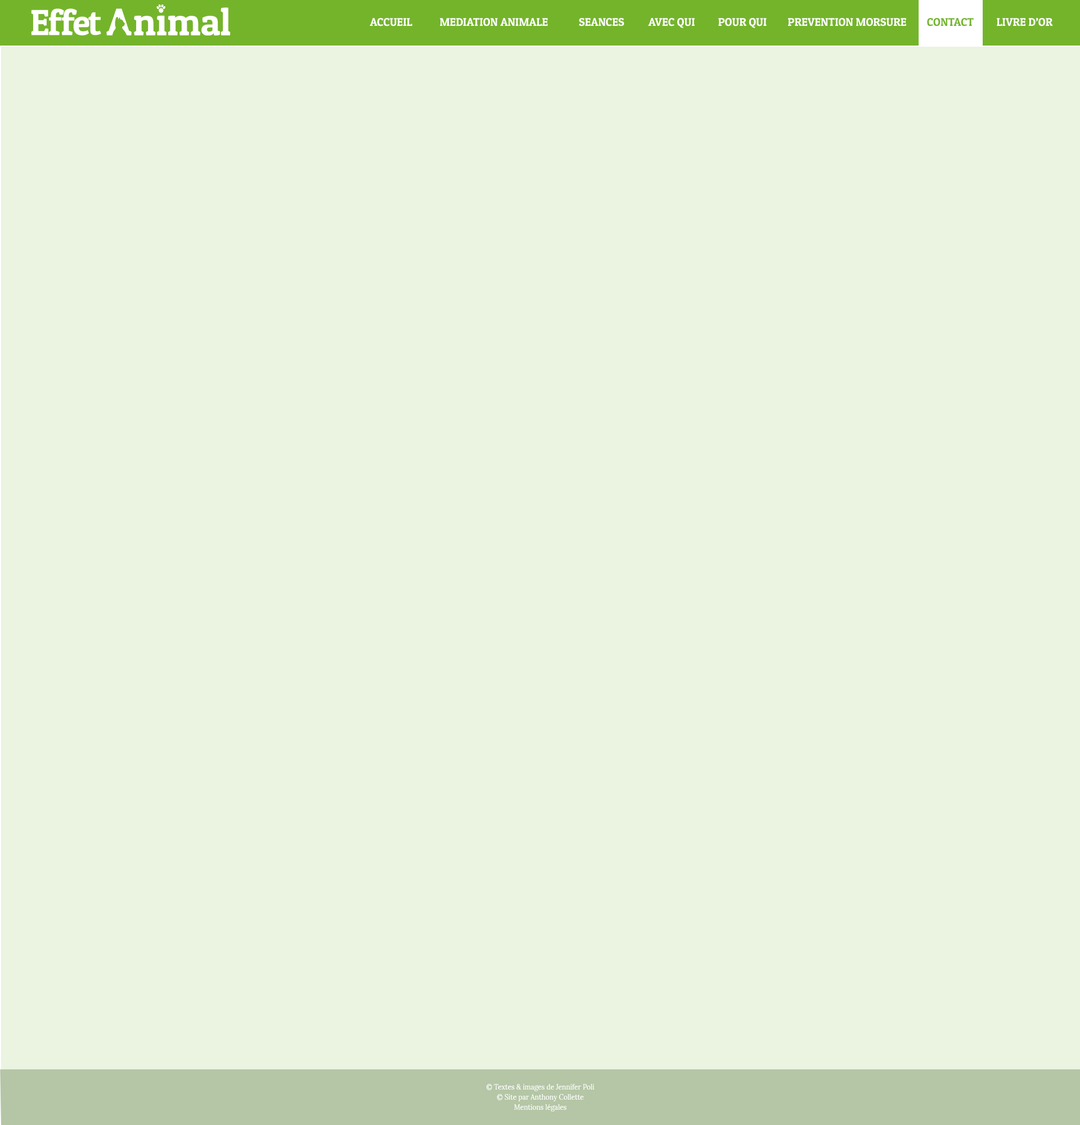
<style>
.page{position:relative;width:1080px;height:1125px;background:#eaf4e1}
.page>*{position:absolute;margin:0}
.t1{font:11.3px "PatuaOne-Regular";color:#ffffff}
.t2{font:11.3px "PatuaOne-Regular";color:#74b42b}
.t3{font:6.7px/10.1px "Lora-Regular";color:#ffffff}
</style>
<div class="page">
<p class="t1" style="left:370px;top:18px;width:683px;height:10px">ACCUEIL MEDIATION ANIMALE SEANCES AVEC QUI POUR QUI PREVENTION MORSURE<span class="t2">S CONTACT</span> LIVRE D’OR</p>
<p class="t3" style="left:486px;top:1084px;width:109px;height:27px;text-align:center">© Textes &amp; images de Jennifer Poli<br>© Site par Anthony Collette<br>Mentions légales</p>
</div>
